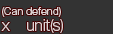
<style>
.page{position:relative;width:113px;height:34px;background:#333333}
.page>*{position:absolute;margin:0}
.t1{font:10px/16px "GothicMB101Pro-Light";letter-spacing:-0.04em;color:#ddd3d3}
.t2{font:14px/16px "GothicMB101Pro-Light";letter-spacing:-0.04em;color:#ddd3d3}
</style>
<div class="page">
<p class="t1" style="left:1px;top:7px;width:62px;height:26px">(Can defend)<br><span class="t2">x    unit(s)</span></p>
</div>
